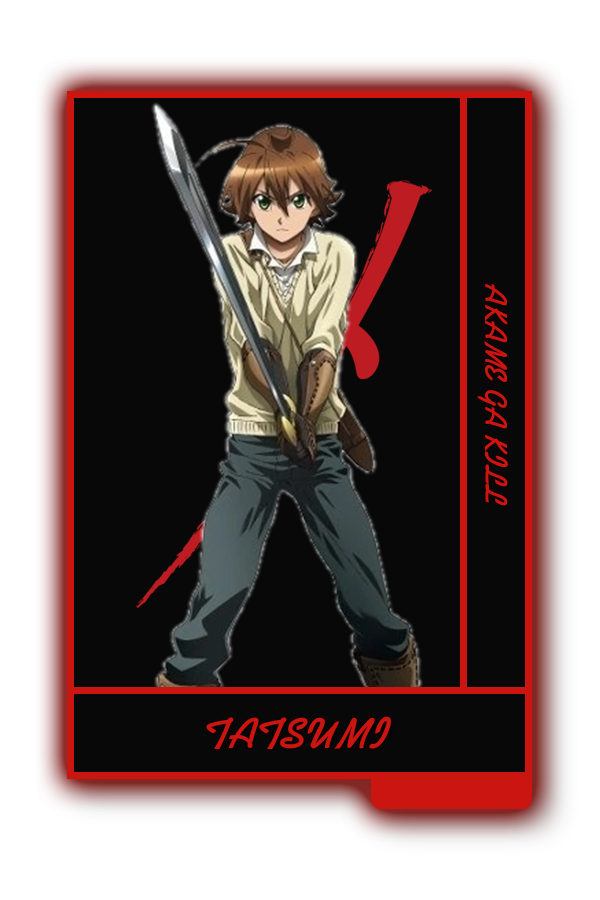
<style>
.page{position:relative;width:600px;height:900px;background:#080808}
.page>*{position:absolute;margin:0}
.t1{font:31.2px "Alako-Bold";color:#cb1511}
.t2{font:43.2px "Alako-Bold";color:#cb1511}
</style>
<div class="page">
<p class="t1" style="left:477px;top:283px;width:31px;height:223px;rotate:90deg">AKAME GA KILL</p>
<p class="t2" style="left:206px;top:716px;width:185px;height:33px">TATSUMI</p>
</div>
